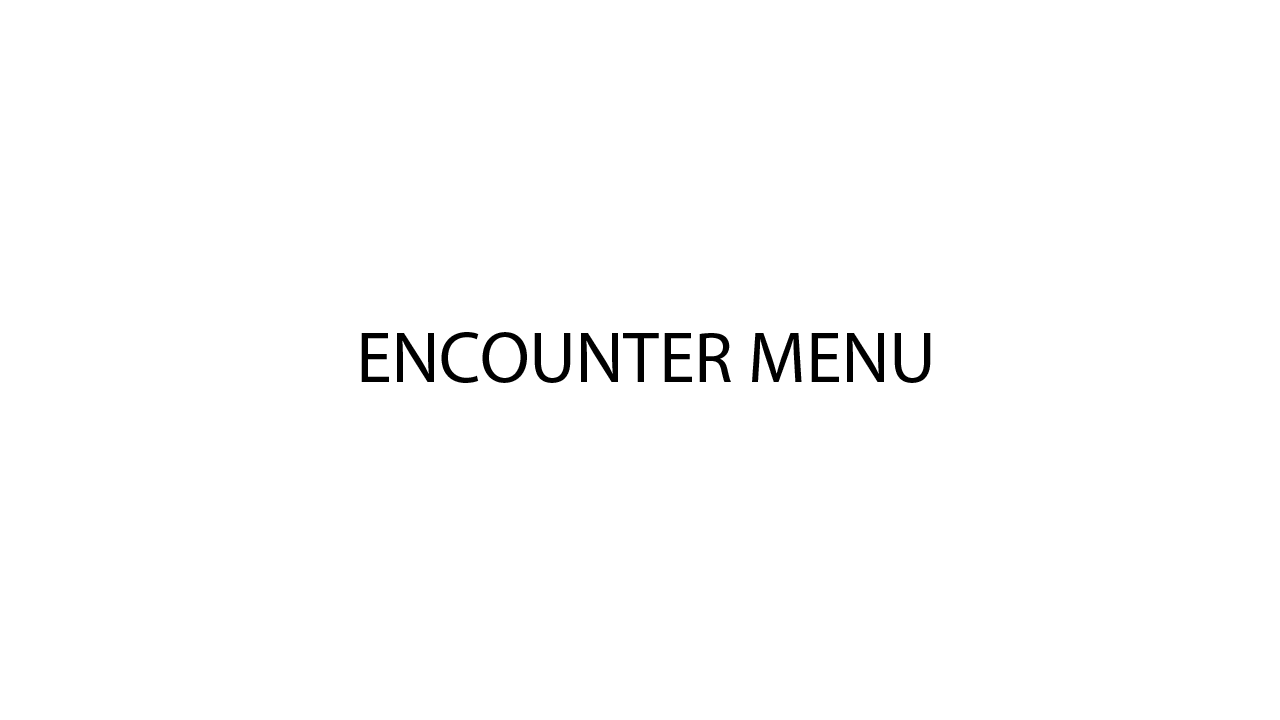
<style>
.page{position:relative;width:1280px;height:720px;background:#ffffff}
.page>*{position:absolute;margin:0}
.t1{font:72px "MyriadPro-Regular";color:#000000}
</style>
<div class="page">
<p class="t1" style="left:361px;top:332px;width:570px;height:51px">ENCOUNTER MENU</p>
</div>
